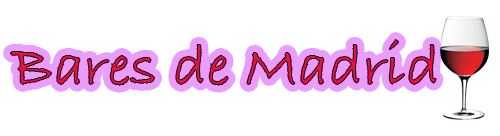
<style>
.page{position:relative;width:500px;height:136px;background:#ffffff}
.page>*{position:absolute;margin:0}
.t1{font:60px "BradleyHandITCTT-Bold"}
</style>
<div class="page">
<p class="t1" style="left:10px;top:39px;width:427px;height:47px">Bares de Madrid</p>
</div>
